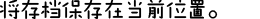
<style>
.page{position:relative;width:260px;height:19px;background:#ffffff}
.page>*{position:absolute;margin:0}
.t1{font:24px "¢è?";color:#000000}
</style>
<div class="page">
<p class="t1" style="left:0px;top:0px;width:218px;height:20px">将存档保存在当前位置。</p>
</div>
